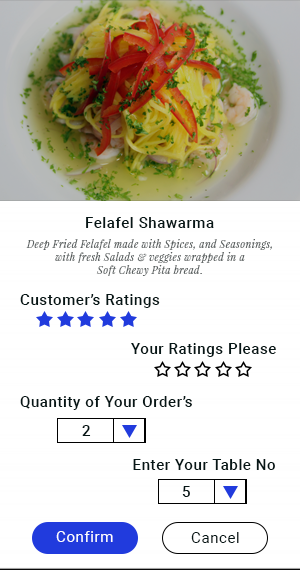
<style>
.page{position:relative;width:300px;height:570px;background:#ffffff}
.page>*{position:absolute;margin:0}
.t1{font:15px "Roboto-Medium";letter-spacing:0.04em;color:#061616}
.t2{font:15px "Roboto-Regular";letter-spacing:0.04em;color:#ffffff}
.t3{font:15px "Roboto-Regular";letter-spacing:0.04em;color:#061616}
</style>
<div class="page">
<p class="t1" style="left:86px;top:217px;width:128px;height:11px">Felafel Shawarma</p>
<p class="t1" style="left:20px;top:294px;width:140px;height:14px">Customer’s Ratings</p>
<p class="t1" style="left:131px;top:343px;width:145px;height:14px">Your Ratings Please</p>
<p class="t1" style="left:20px;top:396px;width:172px;height:14px">Quantity of Your Order’s</p>
<p class="t1" style="left:82px;top:425px;width:9px;height:11px">2</p>
<p class="t1" style="left:133px;top:459px;width:142px;height:11px">Enter Your Table No</p>
<p class="t1" style="left:182px;top:486px;width:8px;height:11px">5</p>
<p class="t2" style="left:56px;top:531px;width:57px;height:11px">Confirm</p>
<p class="t3" style="left:191px;top:532px;width:48px;height:11px">Cancel</p>
</div>
